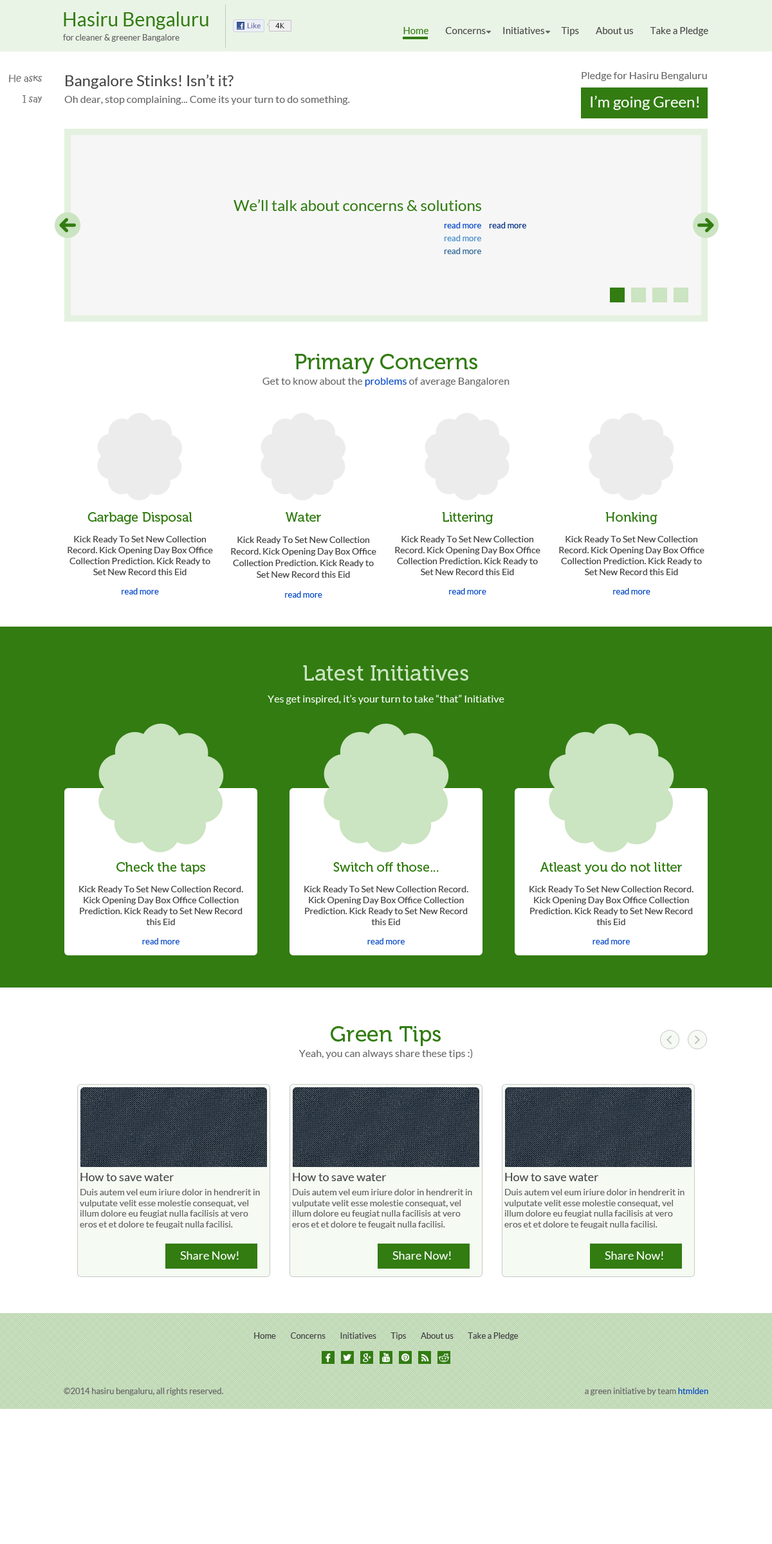
<style>
.page{position:relative;width:772px;height:1544px;background:#ffffff}
.page>*{position:absolute;margin:0}
.t1{font:19.3px "Lato-Regular";color:#327c12}
.t2{font:9.7px "Lato-Regular";color:#444444}
.t3{font:9.7px "Lato-Regular";color:#327c12}
.t4{font:8.4px "Lato-Regular";color:#666666}
.t5{font:9px "KristenITC-Regular";color:#777777}
.t6{font:15.4px "Lato-Regular";color:#444444}
.t7{font:10.3px "Lato-Regular";color:#666666}
.t8{font:15.4px "Lato-Regular";color:#ffffff}
.t9{font:15.4px "Lato-Regular";color:#327c12}
.t10{font:8.4px "Lato-Regular";color:#0549c7}
.t11{font:8.4px "Lato-Regular";color:#012f82}
.t12{font:8.4px "Lato-Regular";color:#428bca}
.t13{font:8.4px "Lato-Regular";color:#2a6496}
.t14{font:21.9px "Museo-500";color:#327c12}
.t15{font:10.3px "Lato-Regular";color:#0549c7}
.t16{font:9px "Lato-Regular";color:#444444}
.t17{font:12.9px "Museo-500";color:#327c12}
.t18{font:9px/11.6px "Lato-Regular";color:#444444}
.t19{font:21.9px "Museo-500";color:#cbe4c1}
.t20{font:10.3px "Lato-Regular";color:#ffffff}
.t21{font:9px "Lato-Regular";color:#666666}
.t22{font:11.6px "Lato-Regular";color:#444444}
.t23{font:11.6px "Lato-Regular";color:#ffffff}
.t24{font:8.4px "Lato-Regular";color:#444444}
</style>
<div class="page">
<p class="t1" style="left:64px;top:12px;width:144px;height:18px">Hasiru Bengaluru</p>
<p class="t2" style="left:403px;top:27px;width:305px;height:9px"><span class="t3">Home</span>         Concerns         Initiatives         Tips         About us         Take a Pledge</p>
<p class="t4" style="left:63px;top:34px;width:117px;height:8px">for cleaner &amp; greener Bangalore</p>
<p class="t5" style="left:8px;top:75px;width:34px;height:7px">He asks</p>
<p class="t6" style="left:66px;top:74px;width:168px;height:15px">Bangalore Stinks! Isn’t it?</p>
<p class="t7" style="left:582px;top:72px;width:125px;height:9px">Pledge for Hasiru Bengaluru</p>
<p class="t5" style="left:22px;top:95px;width:20px;height:8px">I say</p>
<p class="t7" style="left:64px;top:96px;width:286px;height:9px">Oh dear, stop complaining... Come its your turn to do something.</p>
<p class="t8" style="left:591px;top:95px;width:108px;height:15px">I’m going Green!</p>
<p class="t9" style="left:234px;top:199px;width:247px;height:12px">We’ll talk about concerns &amp; solutions</p>
<p class="t10" style="left:444px;top:222px;width:37px;height:6px">read more</p>
<p class="t11" style="left:489px;top:222px;width:37px;height:6px">read more</p>
<p class="t12" style="left:444px;top:235px;width:37px;height:6px">read more</p>
<p class="t13" style="left:444px;top:248px;width:37px;height:6px">read more</p>
<p class="t14" style="left:295px;top:354px;width:182px;height:20px">Primary Concerns</p>
<p class="t7" style="left:263px;top:378px;width:247px;height:9px">Get to know about the <span class="t15">problems</span> of average Bangaloren</p>
<p class="t16" style="left:68px;top:512px;width:145px;height:83px;text-align:center"><span class="t17">Garbage Disposal<br></span>Kick Ready To Set New Collection Record. Kick Opening Day Box Office Collection Prediction. Kick Ready to Set New Record this Eid<br><span class="t10">read more</span></p>
<p class="t18" style="left:231px;top:512px;width:145px;height:86px;text-align:center"><span class="t17">Water<br></span>Kick Ready To Set New Collection Record. Kick Opening Day Box Office Collection Prediction. Kick Ready to Set New Record this Eid<br><span class="t10">read more</span></p>
<p class="t16" style="left:395px;top:512px;width:146px;height:83px;text-align:center"><span class="t17">Littering<br></span>Kick Ready To Set New Collection Record. Kick Opening Day Box Office Collection Prediction. Kick Ready to Set New Record this Eid<br><span class="t10">read more</span></p>
<p class="t16" style="left:559px;top:512px;width:146px;height:83px;text-align:center"><span class="t17">Honking<br></span>Kick Ready To Set New Collection Record. Kick Opening Day Box Office Collection Prediction. Kick Ready to Set New Record this Eid<br><span class="t10">read more</span></p>
<p class="t19" style="left:303px;top:665px;width:165px;height:16px">Latest Initiatives</p>
<p class="t20" style="left:268px;top:694px;width:236px;height:11px">Yes get inspired, it’s your turn to take “that” Initiative</p>
<p class="t16" style="left:79px;top:862px;width:164px;height:83px;text-align:center"><span class="t17">Check the taps<br></span>Kick Ready To Set New Collection Record. Kick Opening Day Box Office Collection Prediction. Kick Ready to Set New Record this Eid<br><span class="t10">read more</span></p>
<p class="t16" style="left:304px;top:862px;width:164px;height:83px;text-align:center"><span class="t17">Switch off those...<br></span>Kick Ready To Set New Collection Record. Kick Opening Day Box Office Collection Prediction. Kick Ready to Set New Record this Eid<br><span class="t10">read more</span></p>
<p class="t16" style="left:530px;top:862px;width:164px;height:83px;text-align:center"><span class="t17">Atleast you do not litter<br></span>Kick Ready To Set New Collection Record. Kick Opening Day Box Office Collection Prediction. Kick Ready to Set New Record this Eid<br><span class="t10">read more</span></p>
<p class="t14" style="left:331px;top:1026px;width:110px;height:20px">Green Tips</p>
<p class="t7" style="left:299px;top:1049px;width:174px;height:10px">Yeah, you can always share these tips :)</p>
<p class="t21" style="left:80px;top:1173px;width:180px;height:56px"><span class="t22">How to save water<br></span>Duis autem vel eum iriure dolor in hendrerit in vulputate velit esse molestie consequat, vel illum dolore eu feugiat nulla facilisis at vero eros et et dolore te feugait nulla facilisi.</p>
<p class="t21" style="left:292px;top:1173px;width:180px;height:56px"><span class="t22">How to save water<br></span>Duis autem vel eum iriure dolor in hendrerit in vulputate velit esse molestie consequat, vel illum dolore eu feugiat nulla facilisis at vero eros et et dolore te feugait nulla facilisi.</p>
<p class="t21" style="left:504px;top:1173px;width:181px;height:56px"><span class="t22">How to save water<br></span>Duis autem vel eum iriure dolor in hendrerit in vulputate velit esse molestie consequat, vel illum dolore eu feugiat nulla facilisis at vero eros et et dolore te feugait nulla facilisi.</p>
<p class="t23" style="left:180px;top:1252px;width:59px;height:8px">Share Now!</p>
<p class="t23" style="left:393px;top:1252px;width:58px;height:8px">Share Now!</p>
<p class="t23" style="left:605px;top:1252px;width:58px;height:8px">Share Now!</p>
<p class="t24" style="left:254px;top:1333px;width:265px;height:7px">Home         Concerns         Initiatives         Tips         About us         Take a Pledge</p>
<p class="t4" style="left:64px;top:1388px;width:159px;height:8px">©2014 hasiru bengaluru, all rights reserved.</p>
<p class="t4" style="left:585px;top:1388px;width:123px;height:8px">a green initiative by team <span class="t10">htmlden</span></p>
</div>
